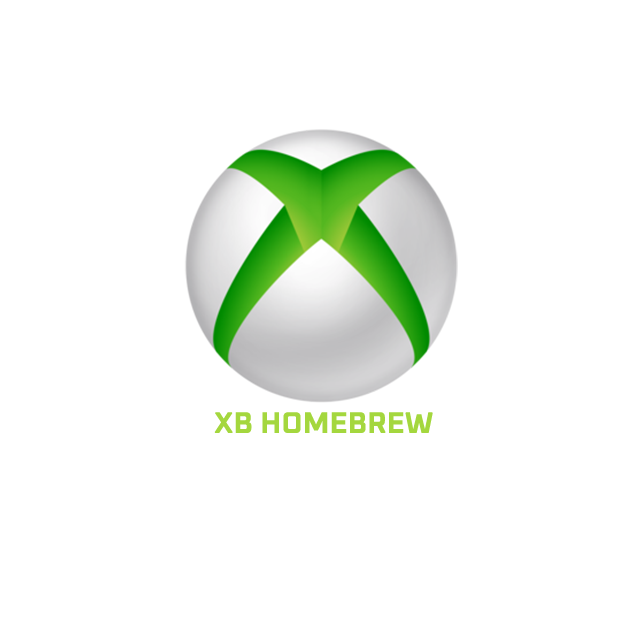
<style>
.page{position:relative;width:640px;height:640px;background:#ffffff}
.page>*{position:absolute;margin:0}
.t1{font:30px "Oxanium-Bold";color:#a4d73e}
</style>
<div class="page">
<p class="t1" style="left:214px;top:412px;width:219px;height:21px">XB HOMEBREW</p>
</div>
